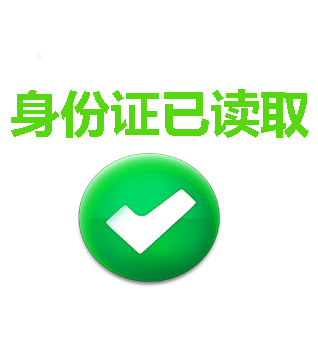
<style>
.page{position:relative;width:318px;height:349px;background:#ffffff}
.page>*{position:absolute;margin:0}
.t1{font:50px "MicrosoftYaHei-Bold";color:#56d710}
</style>
<div class="page">
<p class="t1" style="left:11px;top:89px;width:298px;height:49px">身份证已读取</p>
</div>
